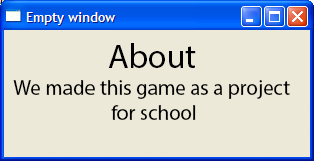
<style>
.page{position:relative;width:314px;height:161px;background:#ece9d8}
.page>*{position:absolute;margin:0}
.t1{font:34px "MyriadPro-Regular";color:#000000}
.t2{font:21px "MyriadPro-Regular";color:#000000}
</style>
<div class="page">
<p class="t1" style="left:108px;top:43px;width:88px;height:25px">About</p>
<p class="t2" style="left:13px;top:80px;width:277px;height:40px;text-align:center">We made this game as a project <br>for school</p>
</div>
